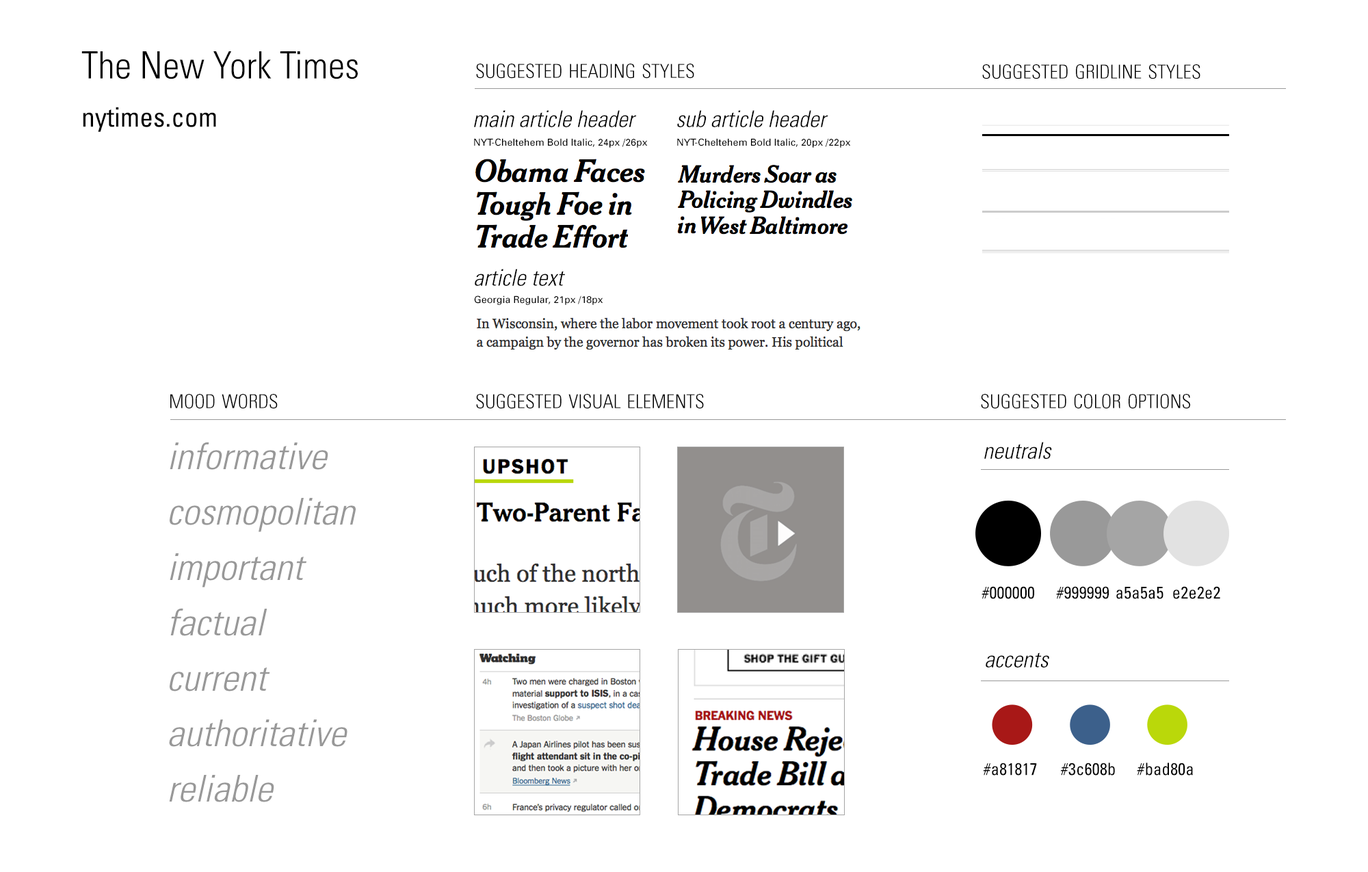
<style>
.page{position:relative;width:1368px;height:872px;background:#ffffff}
.page>*{position:absolute;margin:0}
.t1{font:37.6px/48.2px "Univers-CondensedLight";color:#000000}
.t2{font:27px/48.2px "Univers-Condensed";color:#000000}
.t3{font:27.4px "Univers-CondensedLight";color:#000000;font-variant:small-caps}
.t4{font:23.1px "Univers-CondensedLightOblique";color:#000000}
.t5{font:9.7px "Univers";color:#000000}
.t6{font:37px/55.4px "Univers-CondensedLightOblique";color:#999999;scale:1.05 1}
.t7{font:17.1px "Univers-Condensed";color:#000000}
</style>
<div class="page">
<p class="t1" style="left:81px;top:51px;width:277px;height:81px">The New York Times<br><span class="t2">nytimes.com</span></p>
<p class="t3" style="left:476px;top:64px;width:218px;height:15px">suggested heading styles</p>
<p class="t3" style="left:982px;top:64px;width:218px;height:15px">suggested gridline styles</p>
<p class="t4" style="left:474px;top:110px;width:163px;height:17px">main article header</p>
<p class="t4" style="left:677px;top:110px;width:151px;height:17px">sub article header</p>
<p class="t5" style="left:474px;top:138px;width:174px;height:10px">NYT-Cheltehem Bold Italic, 24px /26px</p>
<p class="t5" style="left:677px;top:138px;width:174px;height:10px">NYT-Cheltehem Bold Italic, 20px /22px</p>
<p class="t4" style="left:475px;top:269px;width:90px;height:17px">article text</p>
<p class="t5" style="left:474px;top:295px;width:129px;height:10px">Georgia Regular, 21px /18px</p>
<p class="t3" style="left:170px;top:394px;width:108px;height:15px">mood words</p>
<p class="t3" style="left:476px;top:394px;width:228px;height:15px">suggested visual elements</p>
<p class="t3" style="left:981px;top:394px;width:209px;height:15px">suggested color options</p>
<p class="t6" style="left:169px;top:442px;width:187px;height:360px">informative<br>cosmopolitan<br>important<br>factual<br>current<br>authoritative<br>reliable</p>
<p class="t4" style="left:984px;top:442px;width:68px;height:17px">neutrals</p>
<p class="t7" style="left:981px;top:586px;width:53px;height:13px">#000000</p>
<p class="t7" style="left:1056px;top:586px;width:52px;height:13px">#999999</p>
<p class="t7" style="left:1116px;top:587px;width:47px;height:12px">a5a5a5</p>
<p class="t7" style="left:1173px;top:586px;width:47px;height:13px">e2e2e2</p>
<p class="t4" style="left:985px;top:652px;width:64px;height:15px">accents</p>
<p class="t7" style="left:983px;top:762px;width:54px;height:13px">#a81817</p>
<p class="t7" style="left:1060px;top:762px;width:55px;height:13px">#3c608b</p>
<p class="t7" style="left:1137px;top:762px;width:56px;height:13px">#bad80a</p>
</div>
